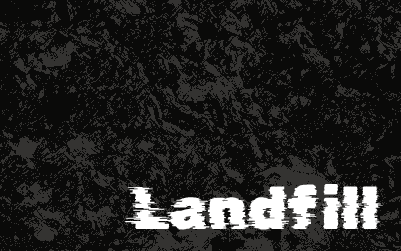
<style>
.page{position:relative;width:401px;height:251px;background:#0a0a09}
.page>*{position:absolute;margin:0}
.t1{font:60px "RubikGlitch-Regular";color:#ffffff}
</style>
<div class="page">
<p class="t1" style="left:124px;top:184px;width:259px;height:46px">Landfill</p>
</div>
